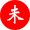
<style>
.page{position:relative;width:30px;height:30px;background:#ff0000}
.page>*{position:absolute;margin:0}
.t1{font:20px "GBWeiBei-Bold";color:#ffffff}
</style>
<div class="page">
<p class="t1" style="left:7px;top:5px;width:17px;height:19px">未</p>
</div>
